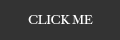
<style>
.page{position:relative;width:120px;height:40px;background:#333333}
.page>*{position:absolute;margin:0}
.t1{font:12px "BigCaslon-Medium";color:#ffffff}
</style>
<div class="page">
<p class="t1" style="left:28px;top:15px;width:65px;height:9px">CLICK ME</p>
</div>
